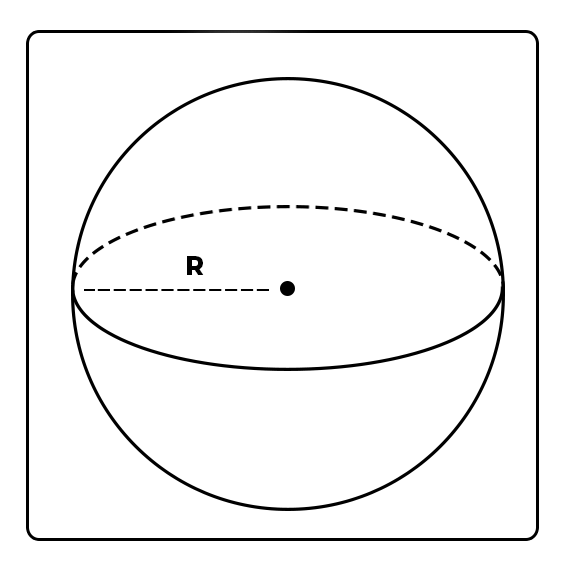
<style>
.page{position:relative;width:567px;height:567px;background:#ffffff}
.page>*{position:absolute;margin:0}
.t1{font:25.9px "Montserrat-ExtraBold";color:#000000}
</style>
<div class="page">
<p class="t1" style="left:187px;top:256px;width:17px;height:19px">R</p>
</div>
